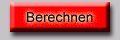
<style>
.page{position:relative;width:120px;height:40px}
.page>*{position:absolute;margin:0}
.t1{font:14px "ArialMT";color:#000000}
</style>
<div class="page">
<p class="t1" style="left:27px;top:12px;width:66px;height:10px">Berechnen</p>
</div>
